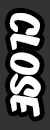
<style>
.page{position:relative;width:50px;height:130px;background:#333333}
.page>*{position:absolute;margin:0}
.t1{font:33.3px "KomikaAxis";color:#ffffff}
</style>
<div class="page">
<p class="t1" style="left:9px;top:13px;width:32px;height:104px;rotate:90deg">Close</p>
</div>
